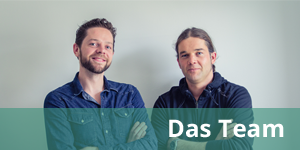
<style>
.page{position:relative;width:300px;height:150px}
.page>*{position:absolute;margin:0}
.t1{font:24px "OpenSans-Bold";letter-spacing:0.01em;color:#ffffff}
</style>
<div class="page">
<p class="t1" style="left:169px;top:119px;width:115px;height:19px">Das Team</p>
</div>
